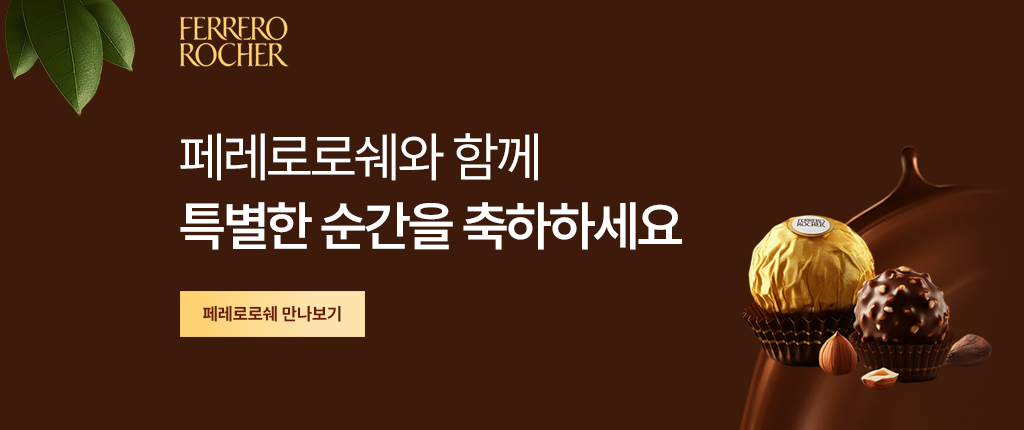
<style>
.page{position:relative;width:1024px;height:430px;background:#3d1a0a}
.page>*{position:absolute;margin:0}
.t1{font:53.7px/69.1px "PretendardVariable-SemiBold";letter-spacing:-0.05em;color:#ffffff}
.t2{font:53.7px/69.1px "PretendardVariable-Regular";letter-spacing:-0.05em;color:#ffffff}
.t3{font:17.4px "PretendardVariable-Bold";color:#691a02}
</style>
<div class="page">
<p class="t1" style="left:180px;top:133px;width:502px;height:117px"><span class="t2">페레로로쉐와 함께<br></span>특별한 순간을 축하하세요</p>
<p class="t3" style="left:203px;top:305px;width:138px;height:17px">페레로로쉐 만나보기</p>
</div>
